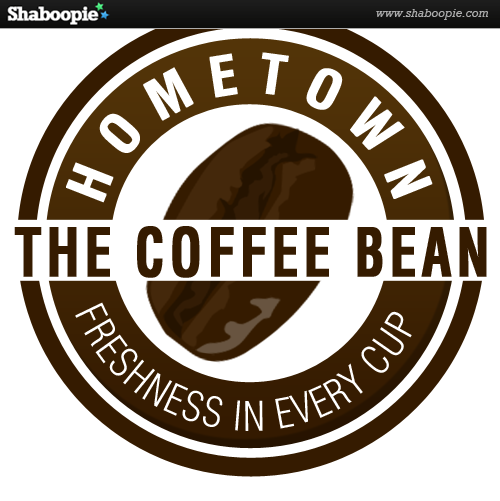
<style>
.page{position:relative;width:500px;height:501px;background:#ffffff}
.page>*{position:absolute;margin:0}
.t1{font:53.8px "Helvetica-Condensed-Bold";letter-spacing:0.01em;color:#ffffff;font-weight:bold}
.t2{font:65.4px "Helvetica-Condensed-Bold";letter-spacing:0.075em;color:#351b00;font-weight:bold;scale:0.81 1}
.t3{font:39.9px "HelveticaLTStd-LightCond";letter-spacing:0.05em;color:#ffffff}
</style>
<div class="page">
<p class="t1" style="left:66px;top:52px;width:367px;height:151px;rotate:-125deg">H O M E T O W N</p>
<p class="t2" style="left:14px;top:226px;width:473px;height:52px">THE COFFEE BEAN</p>
<p class="t3" style="left:75px;top:302px;width:337px;height:129px;rotate:-14deg">FRESHNESS IN EVERY CUP</p>
</div>
